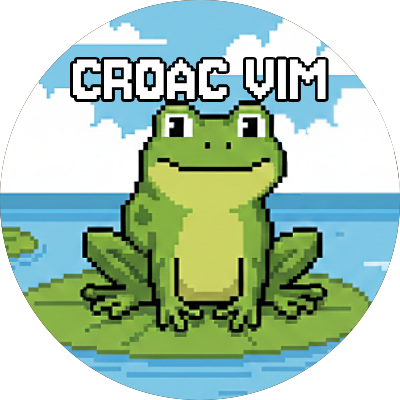
<style>
.page{position:relative;width:400px;height:400px;background:#ffffff}
.page>*{position:absolute;margin:0}
.t1{font:73.8px "Jersey10-Regular";color:#ffffff}
</style>
<div class="page">
<p class="t1" style="left:73px;top:59px;width:253px;height:40px">CROAC VIM</p>
</div>
